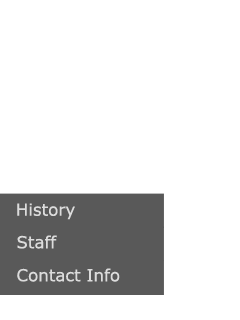
<style>
.page{position:relative;width:240px;height:320px;background:#ffffff}
.page>*{position:absolute;margin:0}
.t1{font:16.7px "Verdana";color:#dcdcdc}
</style>
<div class="page">
<p class="t1" style="left:17px;top:203px;width:58px;height:17px">History</p>
<p class="t1" style="left:17px;top:235px;width:40px;height:14px">Staff</p>
<p class="t1" style="left:17px;top:268px;width:103px;height:14px">Contact Info</p>
</div>
